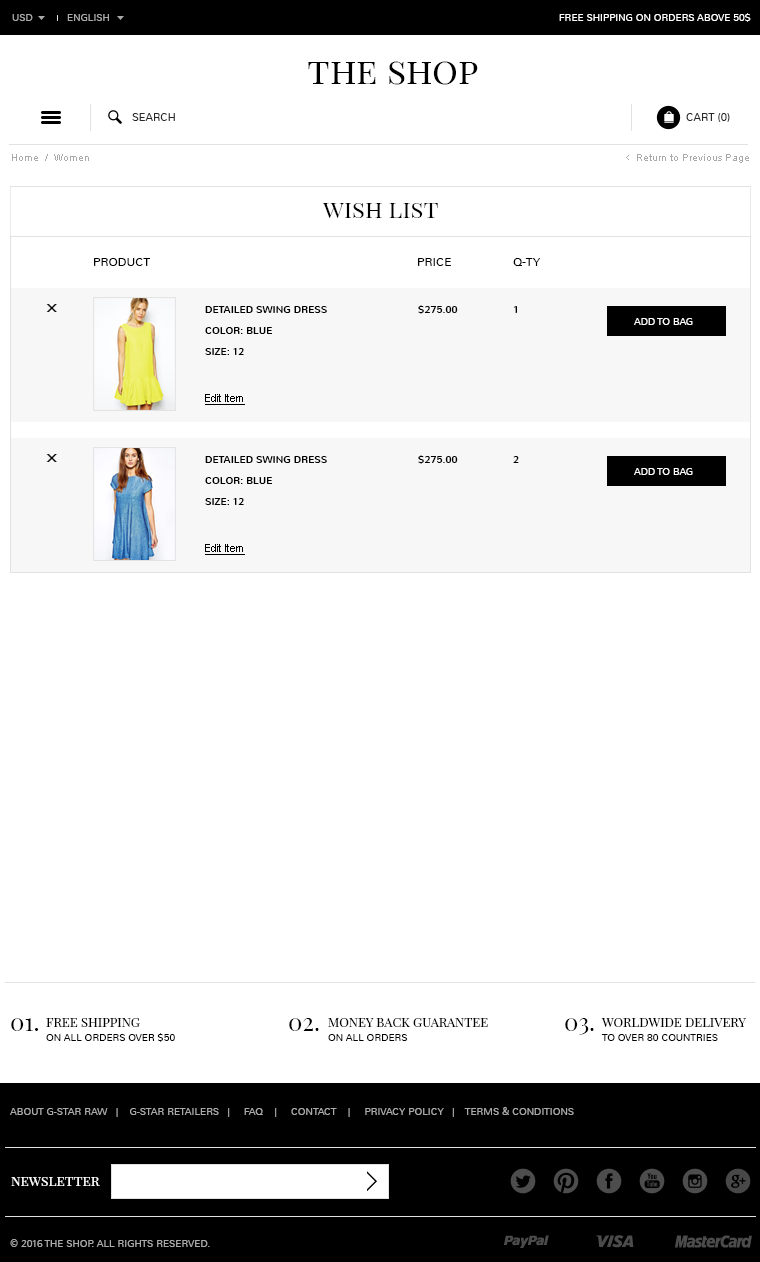
<style>
.page{position:relative;width:760px;height:1262px;background:#ffffff}
.page>*{position:absolute;margin:0}
.t1{font:10px "Nunito-Light";color:#aaaaaa;text-transform:uppercase}
.t2{font:10px "Nunito-Light";color:#ffffff;text-transform:uppercase}
.t3{font:36px "PlayfairDisplaySC-Regular";color:#000000}
.t4{font:11px "Nunito-Light";color:#282828;text-transform:uppercase}
.t5{font:10px "ArialMT";color:#aaaaaa}
.t6{font:12px "Cabin-Regular";color:#aaaaaa}
.t7{font:24px "PlayfairDisplaySC-Regular";color:#000000}
.t8{font:12px "Nunito-Light";color:#000000;text-transform:uppercase}
.t9{font:10px "Nunito-Regular";color:#000000;text-transform:uppercase}
.t10{font:10px "Nunito-Regular";color:#000000}
.t11{font:11px "ArialMT";color:#000000;text-decoration:underline}
.t12{font:13px "PlayfairDisplaySC-Regular";color:#000000;text-transform:uppercase}
.t13{font:10px "Nunito-Light";color:#000000;text-transform:uppercase}
.t14{font:14px "PlayfairDisplaySC-Regular";color:#ffffff}
</style>
<div class="page">
<p class="t1" style="left:12px;top:14px;width:21px;height:7px">usD</p>
<p class="t1" style="left:67px;top:14px;width:42px;height:7px">English</p>
<p class="t2" style="left:559px;top:13px;width:192px;height:9px">free shipping on orders above 50$</p>
<p class="t3" style="left:308px;top:61px;width:170px;height:24px">the shop</p>
<p class="t4" style="left:132px;top:113px;width:43px;height:8px">search</p>
<p class="t4" style="left:686px;top:113px;width:44px;height:9px">Cart (0)</p>
<p class="t5" style="left:12px;top:154px;width:77px;height:7px">Home  /  Women</p>
<p class="t6" style="left:626px;top:155px;width:3px;height:5px">&lt;</p>
<p class="t5" style="left:637px;top:154px;width:112px;height:9px">Return to Previous Page</p>
<p class="t7" style="left:322px;top:203px;width:116px;height:15px">wish list</p>
<p class="t8" style="left:94px;top:258px;width:56px;height:8px">product</p>
<p class="t8" style="left:418px;top:258px;width:33px;height:8px">price</p>
<p class="t8" style="left:513px;top:258px;width:27px;height:8px">q-ty</p>
<p class="t9" style="left:418px;top:305px;width:40px;height:9px">$275.00</p>
<p class="t9" style="left:205px;top:306px;width:122px;height:7px">detailed swing dress</p>
<p class="t10" style="left:513px;top:306px;width:4px;height:7px">1</p>
<p class="t2" style="left:634px;top:318px;width:59px;height:7px">add to bag</p>
<p class="t9" style="left:205px;top:327px;width:67px;height:7px">color: blue</p>
<p class="t9" style="left:205px;top:348px;width:39px;height:7px">size: 12</p>
<p class="t11" style="left:205px;top:394px;width:40px;height:11px">Edit Item</p>
<p class="t9" style="left:205px;top:456px;width:122px;height:7px">detailed swing dress</p>
<p class="t9" style="left:418px;top:455px;width:40px;height:9px">$275.00</p>
<p class="t10" style="left:513px;top:456px;width:6px;height:7px">2</p>
<p class="t2" style="left:634px;top:468px;width:59px;height:7px">add to bag</p>
<p class="t9" style="left:205px;top:477px;width:67px;height:7px">color: blue</p>
<p class="t9" style="left:205px;top:498px;width:39px;height:7px">size: 12</p>
<p class="t11" style="left:205px;top:544px;width:40px;height:11px">Edit Item</p>
<p class="t7" style="left:11px;top:1018px;width:27px;height:13px">01.</p>
<p class="t12" style="left:46px;top:1018px;width:94px;height:9px">Free Shipping</p>
<p class="t7" style="left:289px;top:1018px;width:30px;height:13px">02.</p>
<p class="t12" style="left:328px;top:1018px;width:160px;height:9px">Money back guarantee</p>
<p class="t7" style="left:565px;top:1018px;width:29px;height:17px">03.</p>
<p class="t12" style="left:601px;top:1018px;width:145px;height:9px">Worldwide Delivery</p>
<p class="t13" style="left:46px;top:1033px;width:129px;height:9px">On all orders over $50</p>
<p class="t13" style="left:328px;top:1034px;width:80px;height:7px">On all orders</p>
<p class="t13" style="left:602px;top:1034px;width:116px;height:7px">To over 80 countries</p>
<p class="t1" style="left:10px;top:1107px;width:564px;height:10px">About G-Star Raw   |    G-Star Retailers   |     FAQ    |     Contact    |     Privacy Policy   |    Terms &amp; Conditions</p>
<p class="t14" style="left:11px;top:1177px;width:89px;height:9px">newsletter</p>
<p class="t1" style="left:10px;top:1239px;width:200px;height:8px">© 2016 the shop. All Rights Reserved.</p>
</div>
